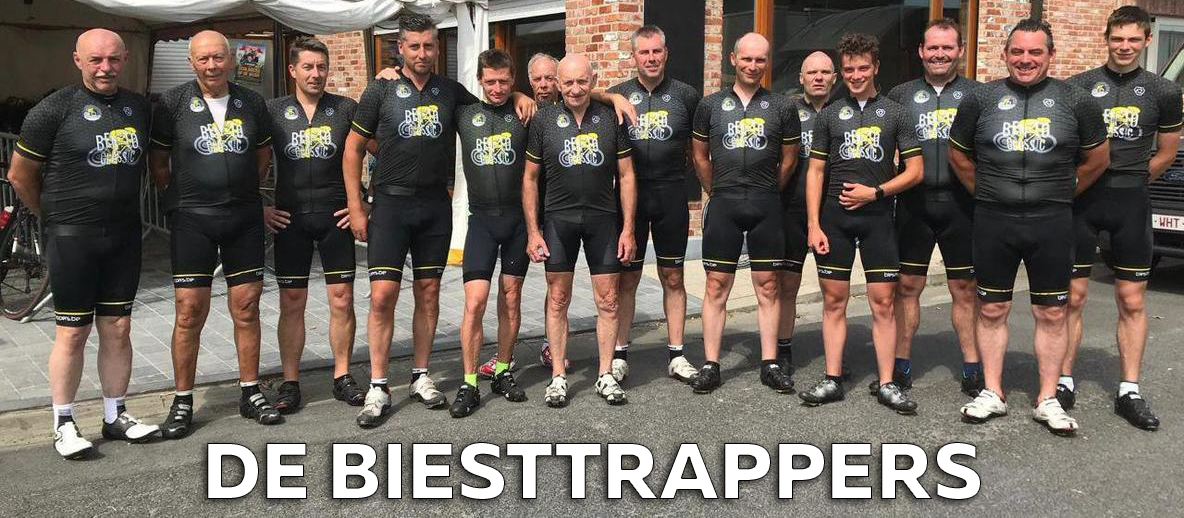
<style>
.page{position:relative;width:1184px;height:518px}
.page>*{position:absolute;margin:0}
.t1{font:80px "MullerExtraBoldDEMO";color:#ffffff}
</style>
<div class="page">
<p class="t1" style="left:207px;top:442px;width:774px;height:58px">DE BIESTTRAPPERS</p>
</div>
